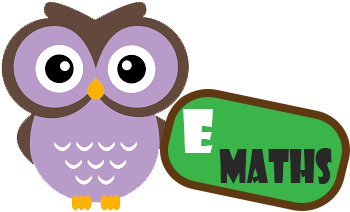
<style>
.page{position:relative;width:350px;height:212px;background:#ffffff}
.page>*{position:absolute;margin:0}
.t1{font:58.3px "ShowcardGothic-Reg";color:#ffffff}
.t2{font:45.4px "ShowcardGothic-Reg";color:#282828;scale:0.74 1}
</style>
<div class="page">
<p class="t1" style="left:183px;top:109px;width:30px;height:44px">E</p>
<p class="t2" style="left:219px;top:148px;width:113px;height:36px">MATHS</p>
</div>
